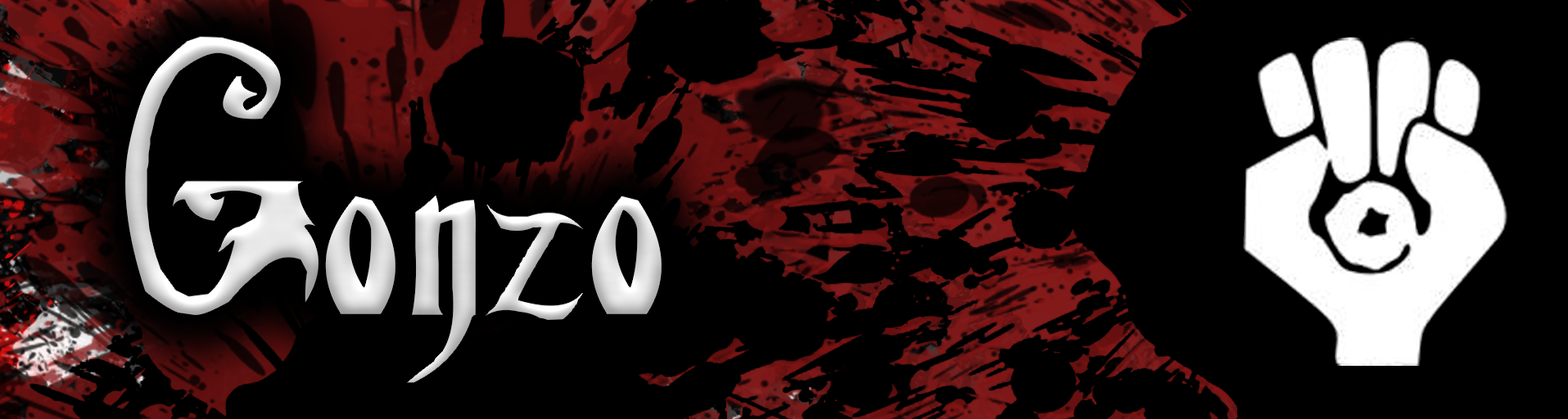
<style>
.page{position:relative;width:1568px;height:419px;background:#000000}
.page>*{position:absolute;margin:0}
.t1{font:327.5px "FiddumsFamilyFont"}
</style>
<div class="page">
<p class="t1" style="left:124px;top:36px;width:538px;height:348px">Gonzo</p>
</div>
